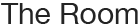
<style>
.page{position:relative;width:140px;height:28px;background:#ffffff}
.page>*{position:absolute;margin:0}
.t1{font:30px "HelveticaNeue";color:#242424}
</style>
<div class="page">
<p class="t1" style="left:1px;top:3px;width:137px;height:21px">The Room</p>
</div>
